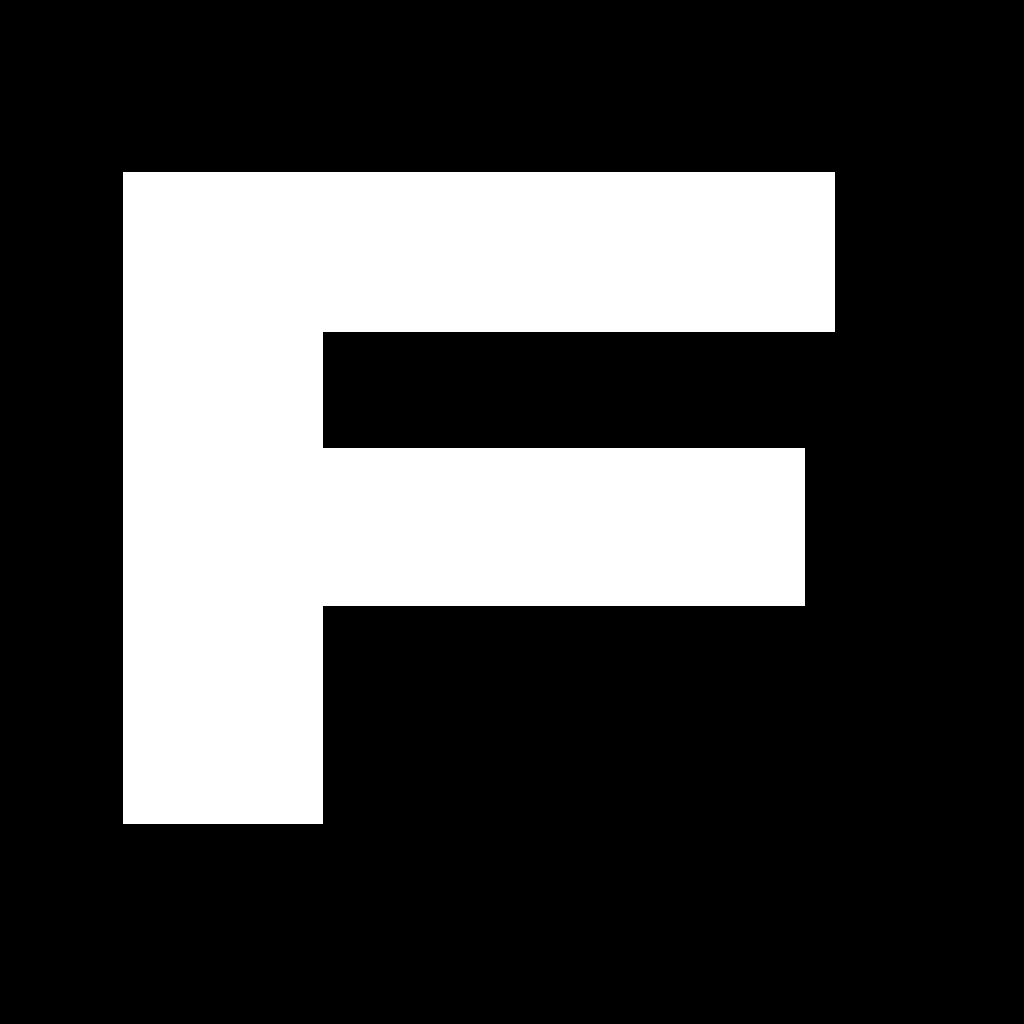
<style>
.page{position:relative;width:1024px;height:1024px;background:#000000}
.page>*{position:absolute;margin:0}
.t1{font:895.8px "Square721BT-BoldExtended";color:#ffffff}
</style>
<div class="page">
<p class="t1" style="left:123px;top:172px;width:712px;height:652px">F</p>
</div>
